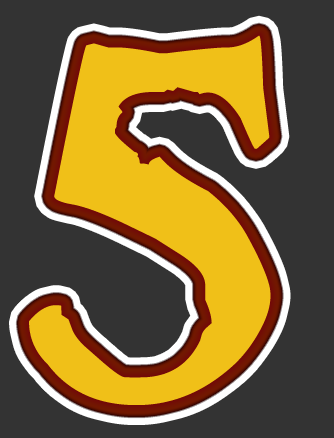
<style>
.page{position:relative;width:334px;height:438px;background:#333333}
.page>*{position:absolute;margin:0}
.t1{font:550px "PiecesofEight";letter-spacing:0.18em;color:#f0c018}
</style>
<div class="page">
<p class="t1" style="left:29px;top:35px;width:242px;height:370px">5</p>
</div>
